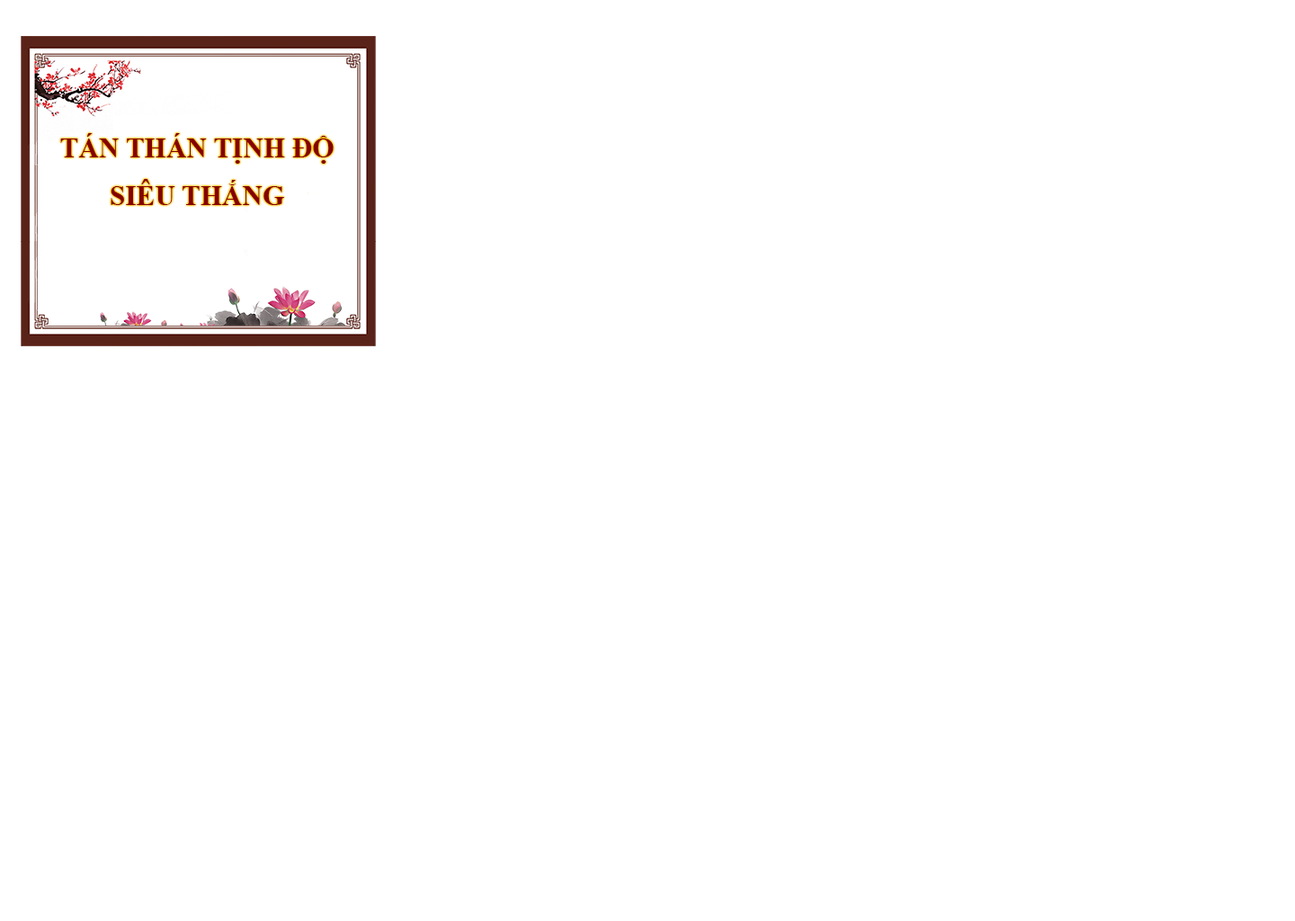
<style>
.page{position:relative;width:1295px;height:921px;background:#ffffff}
.page>*{position:absolute;margin:0}
.t1{font:28.1px/46.9px "TimesNewRomanPS-BoldMT";color:#840001;text-transform:uppercase}
</style>
<div class="page">
<p class="t1" style="left:60px;top:133px;width:274px;height:72px;text-align:center">tán thán tịnh độ<br>siêu thắng</p>
</div>
